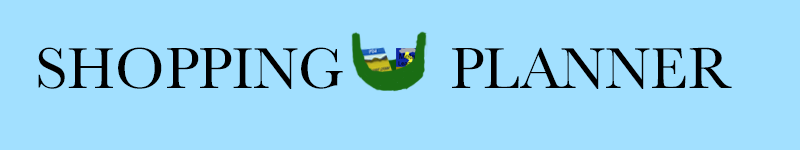
<style>
.page{position:relative;width:800px;height:150px;background:#a2e0ff}
.page>*{position:absolute;margin:0}
.t1{font:60px "Baskerville";color:#000000}
</style>
<div class="page">
<p class="t1" style="left:38px;top:47px;width:694px;height:42px">SHOPPING       PLANNER</p>
</div>
